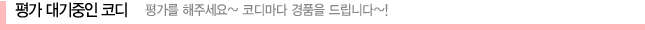
<style>
.page{position:relative;width:645px;height:30px;background:#ffffff}
.page>*{position:absolute;margin:0}
.t1{font:17px "YDIYGO330";letter-spacing:-0.075em;color:#000000;scale:0.91 1}
.t2{font:13.8px "YDIYGO330";letter-spacing:-0.025em;color:#868686;scale:0.91 1}
</style>
<div class="page">
<p class="t1" style="left:15px;top:2px;width:112px;height:16px">평가 대기중인 코디</p>
<p class="t2" style="left:145px;top:3px;width:243px;height:13px">평가를 해주세요~ 코디마다 경품을 드립니다~!</p>
</div>
